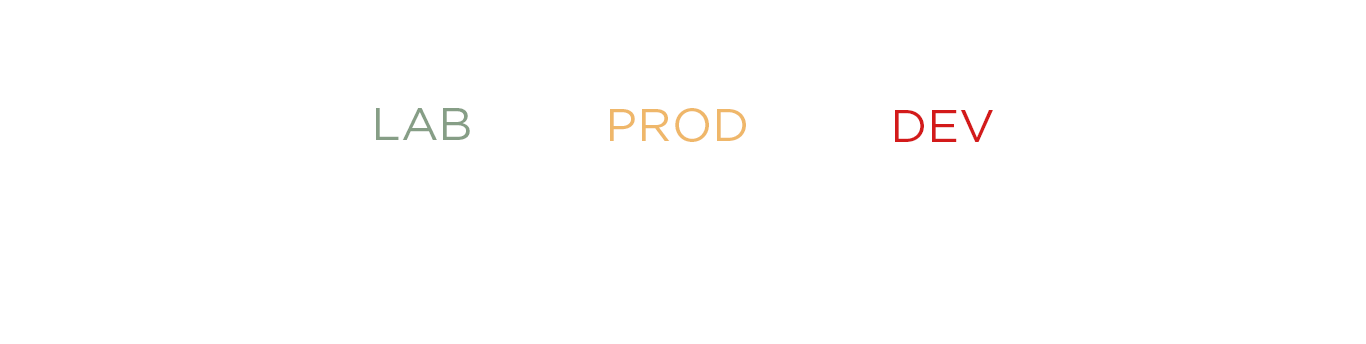
<style>
.page{position:relative;width:1366px;height:344px;background:#ffffff}
.page>*{position:absolute;margin:0}
.t1{font:46px "GothamPro";color:#869e86;scale:1.04 1}
.t2{font:46px "GothamPro";color:#efb76a;scale:1.04 1}
.t3{font:46px "GothamPro";color:#d31a1a;scale:1.04 1}
</style>
<div class="page">
<p class="t1" style="left:376px;top:108px;width:94px;height:32px">LAB</p>
<p class="t2" style="left:610px;top:108px;width:136px;height:34px">PROD</p>
<p class="t3" style="left:895px;top:110px;width:98px;height:32px">DEV</p>
</div>
